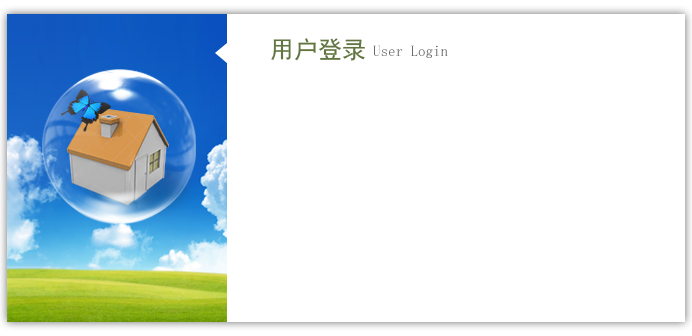
<style>
.page{position:relative;width:692px;height:336px;background:#ffffff}
.page>*{position:absolute;margin:0}
.t1{font:24px "SimHei";color:#627541}
.t2{font:15px "SimSun";color:#6a6a69}
</style>
<div class="page">
<p class="t1" style="left:271px;top:38px;width:94px;height:23px">用户登录</p>
<p class="t2" style="left:373px;top:45px;width:75px;height:13px">User Login</p>
</div>
